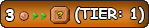
<style>
.page{position:relative;width:149px;height:28px}
.page>*{position:absolute;margin:0}
.t1{font:12px "ComicSansMS-Bold";color:#ffffff}
.t2{font:14.7px "ComicSansMS-Bold";color:#ffffff}
</style>
<div class="page">
<p class="t1" style="left:5px;top:9px;width:9px;height:12px">3</p>
<p class="t2" style="left:75px;top:7px;width:69px;height:16px">(TIER: 1)</p>
</div>
